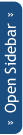
<style>
.page{position:relative;width:23px;height:135px;background:#1a4d80}
.page>*{position:absolute;margin:0}
.t1{font:15px "TrebuchetMS"}
.t2{font:15px "TrebuchetMS";color:#ffffff}
</style>
<div class="page">
<p class="t1" style="left:8px;top:12px;width:6px;height:5px">»</p>
<p class="t2" style="left:4px;top:23px;width:15px;height:90px;rotate:-90deg">Open Sidebar</p>
<p class="t1" style="left:8px;top:120px;width:6px;height:5px">»</p>
</div>
